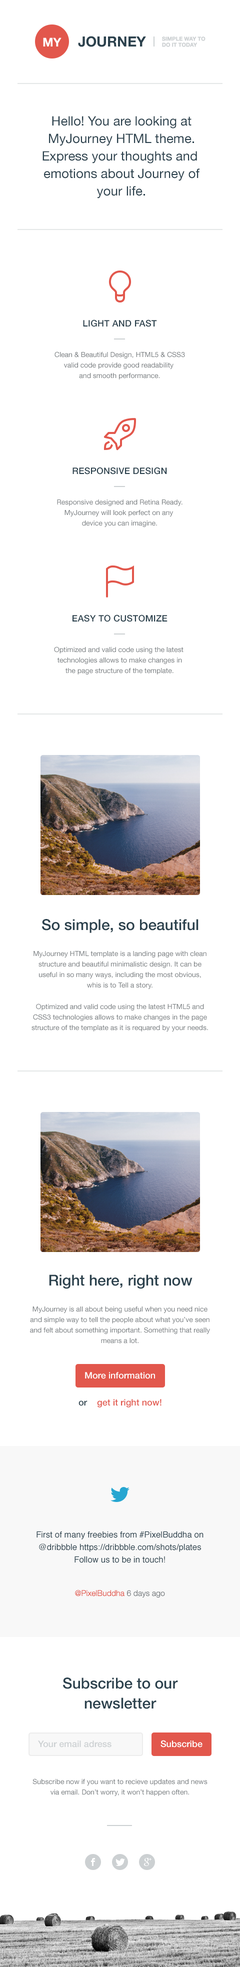
<style>
.page{position:relative;width:240px;height:1967px;background:#ffffff}
.page>*{position:absolute;margin:0}
.t1{font:12px "HelveticaNeue-Bold";color:#ffffff;text-transform:uppercase}
.t2{font:14px "HelveticaNeue-Bold";color:#2b414d;text-transform:uppercase}
.t3{font:5.5px/6px "HelveticaNeue-Bold";color:#ccd0d2;text-transform:uppercase}
.t4{font:13px/17.5px "HelveticaNeue";color:#2b414d}
.t5{font:9px "HelveticaNeue-Medium";letter-spacing:0.015em;color:#2b414d;text-transform:uppercase}
.t6{font:7px/10.5px "HelveticaNeue";color:#777c7f}
.t7{font:15px "HelveticaNeue-Medium";color:#2b414d}
.t8{font:9px "HelveticaNeue-Medium";color:#ffffff}
.t9{font:9px "HelveticaNeue-Medium";color:#e2574c}
.t10{font:9px "HelveticaNeue-Medium";color:#2b414d}
.t11{font:8.5px/12.5px "Helvetica";color:#2b414d}
.t12{font:8px "HelveticaNeue-Light";color:#e2574c}
.t13{font:8px "HelveticaNeue-Light";color:#777c7f}
.t14{font:15px/20px "HelveticaNeue-Medium";color:#2b414d}
.t15{font:9px "HelveticaNeue-Medium";color:#ccd0d2}
</style>
<div class="page">
<p class="t1" style="left:43px;top:38px;width:19px;height:9px">My</p>
<p class="t2" style="left:78px;top:36px;width:68px;height:11px">journey</p>
<p class="t3" style="left:162px;top:37px;width:44px;height:10px">SIMPLE WAY to <br>do it today</p>
<p class="t4" style="left:43px;top:116px;width:157px;height:83px;text-align:center">Hello! You are looking at<br>MyJourney HTML theme.<br>Express your thoughts and <br>emotions about Journey of<br>your life.</p>
<p class="t5" style="left:83px;top:320px;width:74px;height:7px">light and fast</p>
<p class="t6" style="left:55px;top:352px;width:130px;height:28px;text-align:center">Clean &amp; Beautiful Design, HTML5 &amp; CSS3<br>valid code provide good readability <br>and smooth performance.</p>
<p class="t5" style="left:73px;top:467px;width:94px;height:8px">responsive design</p>
<p class="t6" style="left:57px;top:500px;width:126px;height:27px;text-align:center">Responsive designed and Retina Ready.<br>MyJourney will look perfect on any <br>device you can imagine.</p>
<p class="t5" style="left:73px;top:615px;width:95px;height:7px">easy to customize</p>
<p class="t6" style="left:54px;top:647px;width:130px;height:28px;text-align:center">Optimized and valid code using the latest <br>technologies allows to make changes in<br>the page structure of the template.</p>
<p class="t7" style="left:42px;top:919px;width:157px;height:14px">So simple, so beautiful</p>
<p class="t6" style="left:34px;top:951px;width:173px;height:38px;text-align:center">MyJourney HTML template is a landing page with clean structure and beautiful minimalistic design. It can be useful in so many ways, including the most obvious, <br>whis is to Tell a story.</p>
<p class="t6" style="left:32px;top:1004px;width:176px;height:28px;text-align:center">Optimized and valid code using the latest HTML5 and CSS3 technologies allows to make changes in the page structure of the template as it is requared by your needs.</p>
<p class="t7" style="left:49px;top:1275px;width:144px;height:14px">Right here, right now</p>
<p class="t6" style="left:30px;top:1307px;width:180px;height:37px;text-align:center">MyJourney is all about being useful when you need nice and simple way to tell the people about what you’ve seen and felt about something important. Something that really means a lot.</p>
<p class="t8" style="left:85px;top:1372px;width:70px;height:7px">More information</p>
<p class="t9" style="left:79px;top:1399px;width:83px;height:9px"><span class="t10">or    </span>get it right now!</p>
<p class="t11" style="left:37px;top:1531px;width:167px;height:32px;text-align:center">First of many freebies from #PixelBuddha on @dribbble https://dribbble.com/shots/plates Follow us to be in touch!</p>
<p class="t12" style="left:75px;top:1590px;width:90px;height:8px">@PixelBuddha <span class="t13">6 days ago</span></p>
<p class="t14" style="left:63px;top:1678px;width:115px;height:31px;text-align:center">Subscribe to our<br>newsletter</p>
<p class="t15" style="left:38px;top:1741px;width:74px;height:7px">Your email adress</p>
<p class="t8" style="left:161px;top:1740px;width:42px;height:8px">Subscribe</p>
<p class="t6" style="left:33px;top:1779px;width:175px;height:17px;text-align:center">Subscribe now if you want to recieve updates and news via email. Don’t worry, it won’t happen often.</p>
</div>
